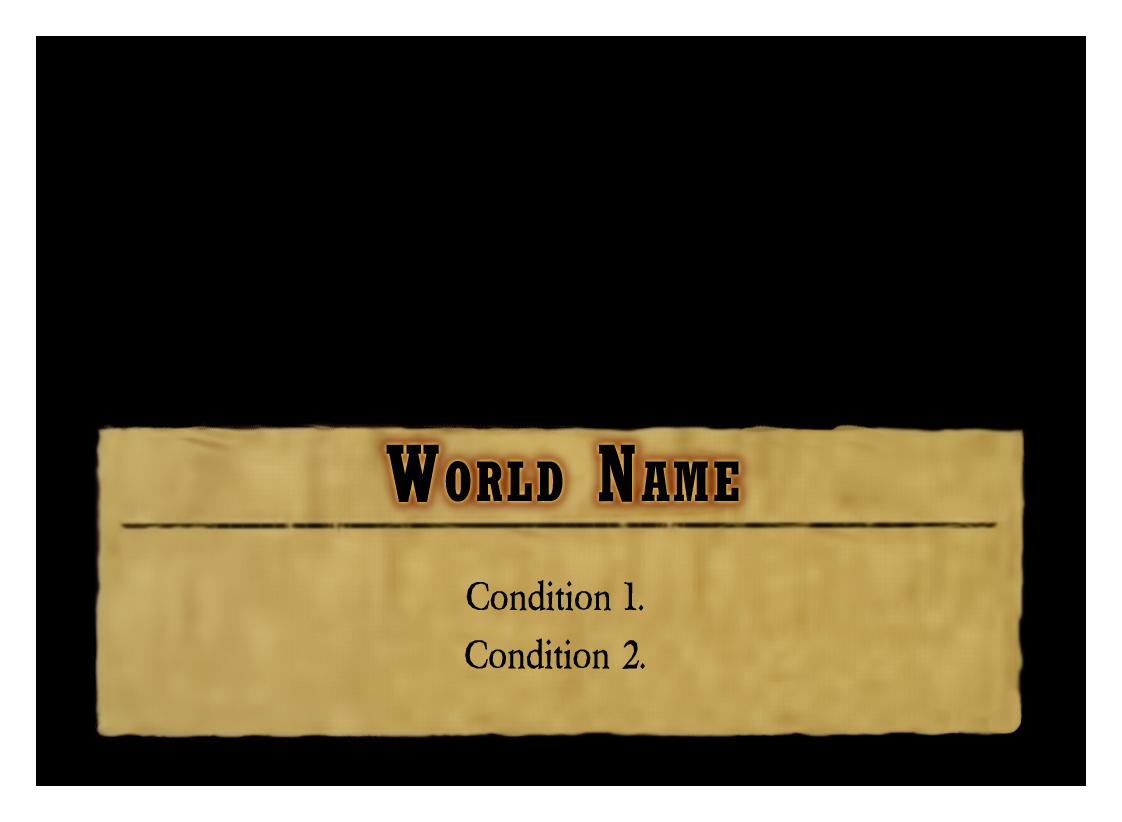
<style>
.page{position:relative;width:1122px;height:822px;background:#000000}
.page>*{position:absolute;margin:0}
.t1{font:79.2px "Rockwell-CondensedBold";letter-spacing:0.05em;color:#000000;font-variant:small-caps;font-weight:bold;scale:0.9 1}
.t2{font:41.7px/45.8px "Berylium-Regular";color:#000000;font-weight:bold;scale:0.9 1}
.t3{font:41.7px/58.3px "Berylium-Regular";color:#000000;font-weight:bold;scale:0.9 1}
</style>
<div class="page">
<p class="t1" style="left:386px;top:444px;width:353px;height:58px">World Name</p>
<p class="t2" style="left:465px;top:580px;width:180px;height:89px;text-align:center">Condition 1.<br><span class="t3">Condition 2.</span></p>
</div>
